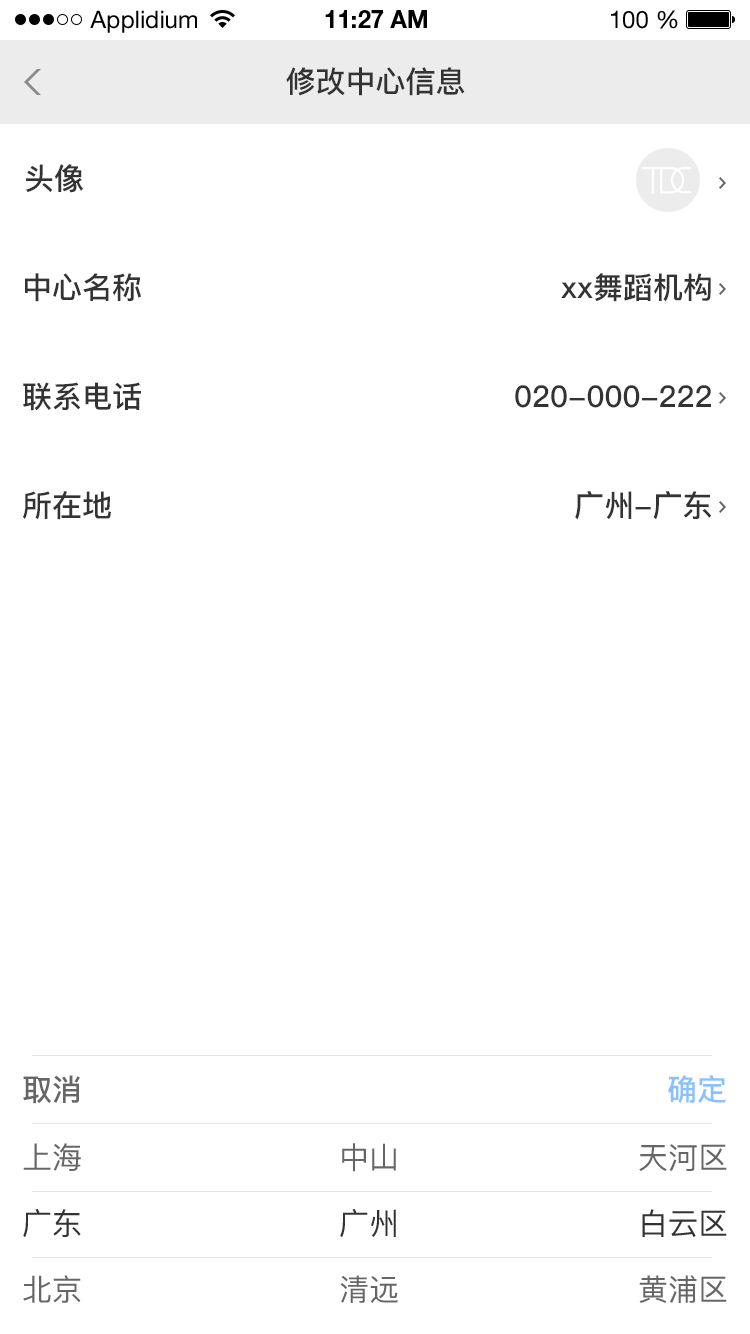
<style>
.page{position:relative;width:750px;height:1334px;background:#ffffff}
.page>*{position:absolute;margin:0}
.t1{font:24px "HelveticaNeueLTStd-Roman";color:#000000}
.t2{font:24px "HelveticaNeueLTStd-Bd";color:#000000}
.t3{font:30px "PingFang-SC-Bold";color:#333333}
.t4{font:30px "PingFang-SC-Bold";color:#666666}
.t5{font:30px "PingFang-SC-Bold";color:#8ac0ff}
.t6{font:30px "PingFang-SC-Medium";color:#666666}
.t7{font:30px "PingFang-SC-Medium";color:#333333}
</style>
<div class="page">
<p class="t1" style="left:90px;top:10px;width:107px;height:23px">Applidium</p>
<p class="t2" style="left:325px;top:10px;width:102px;height:18px">11:27 AM</p>
<p class="t1" style="left:611px;top:10px;width:67px;height:19px">100 %</p>
<p class="t3" style="left:286px;top:67px;width:179px;height:29px">修改中心信息</p>
<p class="t3" style="left:26px;top:164px;width:57px;height:29px">头像</p>
<p class="t3" style="left:25px;top:273px;width:116px;height:29px">中心名称</p>
<p class="t3" style="left:561px;top:273px;width:150px;height:29px">xx舞蹈机构</p>
<p class="t3" style="left:23px;top:382px;width:118px;height:29px">联系电话</p>
<p class="t3" style="left:515px;top:385px;width:196px;height:23px">020-000-222</p>
<p class="t3" style="left:23px;top:491px;width:88px;height:29px">所在地</p>
<p class="t3" style="left:575px;top:491px;width:137px;height:29px">广州-广东</p>
<p class="t4" style="left:23px;top:1075px;width:57px;height:29px">取消</p>
<p class="t5" style="left:668px;top:1075px;width:58px;height:28px">确定</p>
<p class="t6" style="left:23px;top:1143px;width:58px;height:28px">上海</p>
<p class="t6" style="left:342px;top:1143px;width:54px;height:29px">中山</p>
<p class="t6" style="left:639px;top:1144px;width:88px;height:27px">天河区</p>
<p class="t7" style="left:23px;top:1209px;width:58px;height:28px">广东</p>
<p class="t7" style="left:340px;top:1209px;width:56px;height:28px">广州</p>
<p class="t7" style="left:642px;top:1209px;width:85px;height:29px">白云区</p>
<p class="t6" style="left:23px;top:1275px;width:58px;height:28px">北京</p>
<p class="t6" style="left:340px;top:1275px;width:58px;height:28px">清远</p>
<p class="t6" style="left:639px;top:1275px;width:88px;height:28px">黄浦区</p>
</div>
